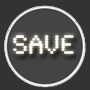
<style>
.page{position:relative;width:90px;height:90px;background:#333333}
.page>*{position:absolute;margin:0}
.t1{font:27px "SynchroLET";color:#fffcfc}
</style>
<div class="page">
<p class="t1" style="left:13px;top:35px;width:61px;height:19px">save</p>
</div>
